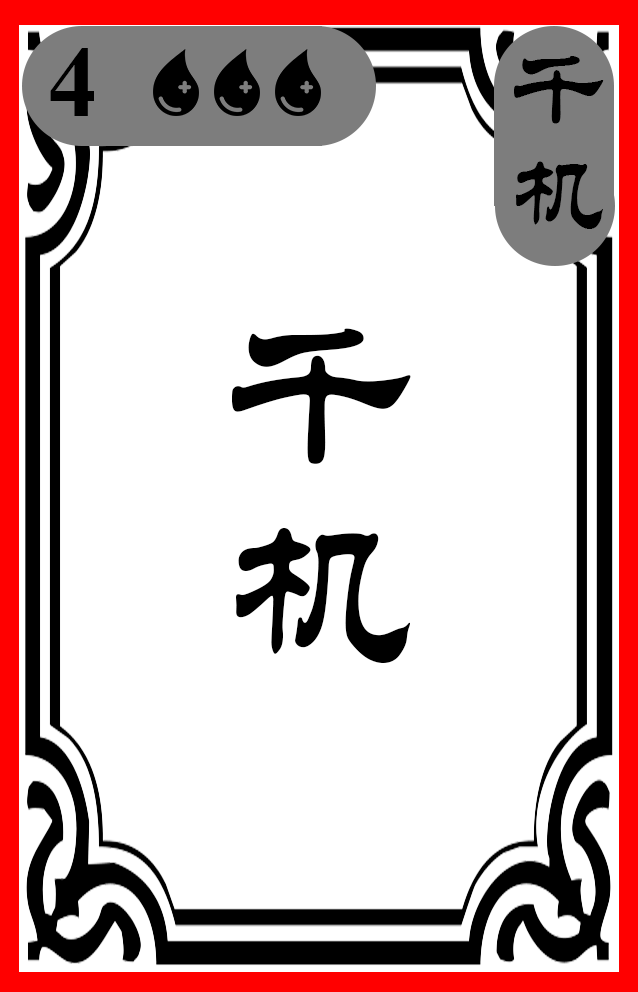
<style>
.page{position:relative;width:638px;height:992px;background:#ffffff}
.page>*{position:absolute;margin:0}
.t1{font:100px "TimesNewRomanPS-BoldMT";color:#000000}
.t2{font:100px "STLiti";color:#000000}
.t3{font:200px "STLiti";color:#000000}
</style>
<div class="page">
<p class="t1" style="left:50px;top:48px;width:44px;height:68px">4</p>
<p class="t2" style="left:514px;top:56px;width:90px;height:173px;text-align:center">千机</p>
<p class="t3" style="left:232px;top:328px;width:179px;height:335px">千机</p>
</div>
